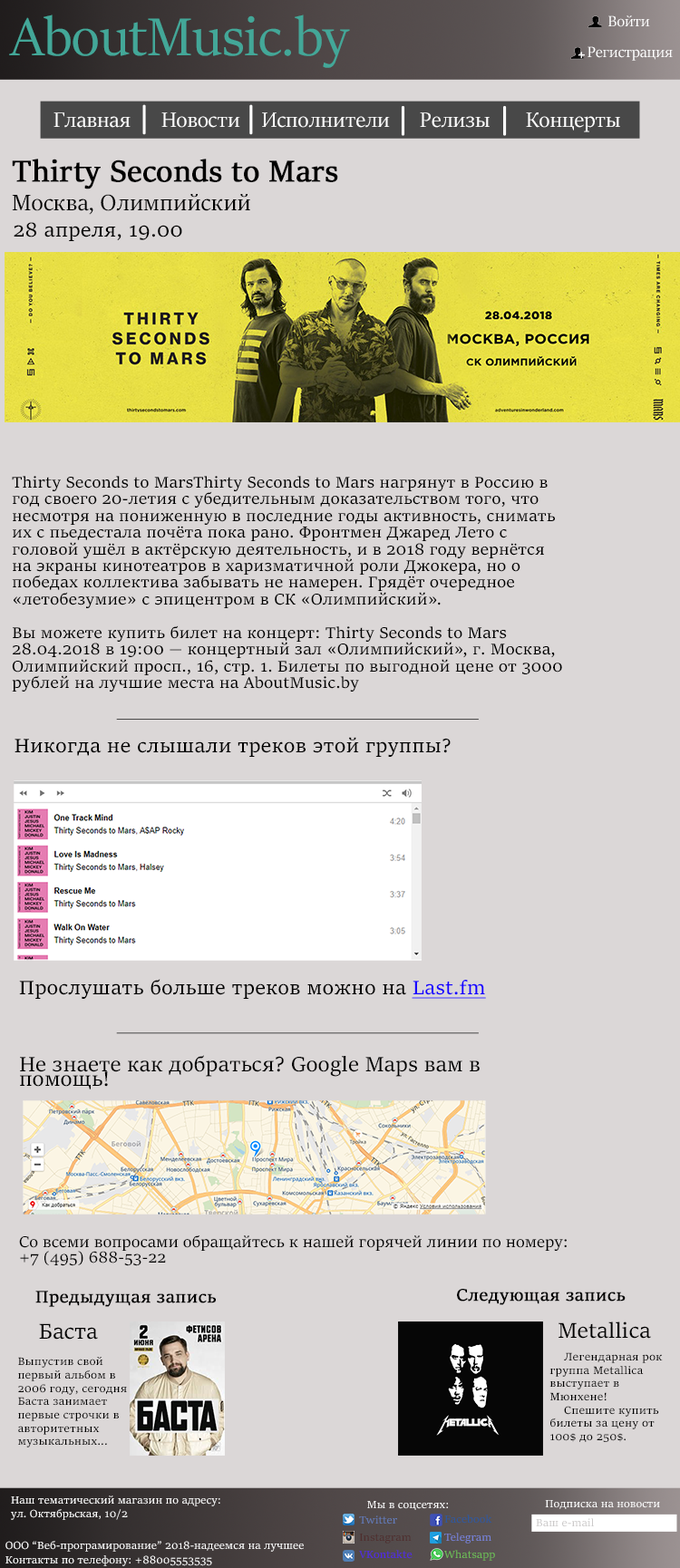
<style>
.page{position:relative;width:680px;height:1568px;background:#dbd7d7}
.page>*{position:absolute;margin:0}
.t1{font:60px "SitkaBanner";color:#43a798}
.t2{font:16.7px "SitkaBanner";color:#ffffff}
.t3{font:23.3px "SitkaBanner";color:#ffffff}
.t4{font:33.4px "SitkaDisplay";color:#000000;font-weight:bold}
.t5{font:25px "SitkaDisplay";color:#000000}
.t6{font:20.9px "SitkaText";color:#000000}
.t7{font:16.7px/16.7px "SitkaText";color:#000000}
.t8{font:20.7px "SitkaText";color:#000000}
.t9{font:20.7px "SitkaText";color:#1800ff;text-decoration:underline}
.t10{font:22.6px "SitkaSubheading";color:#000000}
.t11{font:17px/15.1px "SitkaSubheading";color:#000000}
.t12{font:18.3px "SitkaSubheading";color:#000000;font-weight:bold}
.t13{font:23.3px "SitkaSubheading";color:#000000}
.t14{font:11.7px/13.3px "SitkaText";color:#000000}
.t15{font:11.7px/13.3px "SitkaSubheading";color:#ffffff}
.t16{font:11.7px "SitkaSubheading";color:#ffffff}
.t17{font:11.7px "SitkaSubheading";color:#637cba}
.t18{font:11.7px "SitkaSubheading";color:#2d589e}
.t19{font:11.7px "SitkaSubheading";color:#cccaca}
.t20{font:11.7px "SitkaSubheading";color:#4e2e2e}
.t21{font:11.7px "SitkaSubheading";color:#7884dc}
.t22{font:11.7px "SitkaSubheading";color:#5027e7}
.t23{font:11.7px "SitkaSubheading";color:#6dc057}
</style>
<div class="page">
<p class="t1" style="left:9px;top:15px;width:341px;height:53px">AboutMusic.by</p>
<p class="t2" style="left:608px;top:15px;width:42px;height:12px">Войти</p>
<p class="t2" style="left:587px;top:46px;width:86px;height:15px">Регистрация</p>
<p class="t3" style="left:53px;top:112px;width:78px;height:16px">Главная</p>
<p class="t3" style="left:161px;top:112px;width:79px;height:16px">Новости</p>
<p class="t3" style="left:262px;top:112px;width:128px;height:16px">Исполнители</p>
<p class="t3" style="left:420px;top:112px;width:69px;height:16px">Релизы</p>
<p class="t3" style="left:526px;top:112px;width:94px;height:20px">Концерты</p>
<p class="t4" style="left:12px;top:159px;width:326px;height:30px">Thirty Seconds to Mars</p>
<p class="t5" style="left:12px;top:194px;width:238px;height:21px">Москва, Олимпийский</p>
<p class="t6" style="left:14px;top:222px;width:168px;height:19px">28 апреля, 19.00</p>
<p class="t7" style="left:12px;top:476px;width:550px;height:216px">Thirty Seconds to MarsThirty Seconds to Mars нагрянут в Россию в год своего 20-летия с убедительным доказательством того, что несмотря на пониженную в последние годы активность, снимать их с пьедестала почёта пока рано. Фронтмен Джаред Лето с головой ушёл в актёрскую деятельность, и в 2018 году вернётся на экраны кинотеатров в харизматичной роли Джокера, но о победах коллектива забывать не намерен. Грядёт очередное «летобезумие» с эпицентром в СК «Олимпийский».<br><br>Вы можете купить билет на концерт: Thirty Seconds to Mars 28.04.2018 в 19:00 — концертный зал «Олимпийский», г. Москва, Олимпийский просп., 16, стр. 1. Билеты по выгодной цене от 3000 рублей на лучшие места на AboutMusic.by</p>
<p class="t8" style="left:15px;top:737px;width:435px;height:20px">Никогда не слышали треков этой группы?</p>
<p class="t8" style="left:19px;top:979px;width:467px;height:20px">Прослушать больше треков можно на <span class="t9">Last.fm</span></p>
<p class="t10" style="left:20px;top:1055px;width:459px;height:34px">Не знаете как добраться? Google Maps вам в помощь!</p>
<p class="t11" style="left:19px;top:1235px;width:547px;height:31px">Со всеми вопросами обращайтесь к нашей горячей линии по номеру: <br>+7 (495) 688-53-22</p>
<p class="t12" style="left:457px;top:1289px;width:168px;height:16px">Следующая запись</p>
<p class="t12" style="left:35px;top:1291px;width:181px;height:16px">Предыдущая запись</p>
<p class="t13" style="left:39px;top:1323px;width:59px;height:17px">Баста</p>
<p class="t13" style="left:558px;top:1321px;width:93px;height:18px">Metallica</p>
<p class="t14" style="left:18px;top:1357px;width:109px;height:90px">Выпустив свой первый альбом в 2006 году, сегодня Баста занимает первые строчки в авторитетных музыкальных...</p>
<p class="t14" style="left:549px;top:1352px;width:114px;height:90px">Легендарная рок группа Metallica выступает в Мюнхене!<br> Спешите купить билеты за цену от 100$ до 250$.</p>
<p class="t15" style="left:11px;top:1495px;width:209px;height:25px">Наш тематический магазин по адресу:<br>ул. Октябрьская, 10/2</p>
<p class="t16" style="left:367px;top:1501px;width:81px;height:9px">Мы в соцсетях:</p>
<p class="t16" style="left:545px;top:1500px;width:115px;height:9px">Подписка на новости</p>
<p class="t17" style="left:359px;top:1515px;width:38px;height:9px">Twitter</p>
<p class="t18" style="left:444px;top:1515px;width:48px;height:9px">Facebook</p>
<p class="t19" style="left:536px;top:1518px;width:58px;height:9px">Ваш e-mail</p>
<p class="t16" style="left:5px;top:1541px;width:299px;height:11px">ООО “Веб-програмирование” 2018-надеемся на лучшее</p>
<p class="t20" style="left:359px;top:1534px;width:52px;height:10px">Instagram</p>
<p class="t21" style="left:444px;top:1533px;width:47px;height:11px">Telegram</p>
<p class="t22" style="left:359px;top:1550px;width:53px;height:9px">VKontakte</p>
<p class="t23" style="left:444px;top:1550px;width:51px;height:11px">Whatsapp</p>
<p class="t16" style="left:5px;top:1555px;width:207px;height:11px">Контакты по телефону: +88005553535</p>
</div>
